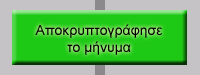
<style>
.page{position:relative;width:200px;height:75px;background:#c6c3c6}
.page>*{position:absolute;margin:0}
.t1{font:14px "ArialMT";color:#000000}
</style>
<div class="page">
<p class="t1" style="left:35px;top:24px;width:127px;height:31px;text-align:center">Αποκρυπτογράφησε<br>το μήνυμα</p>
</div>
